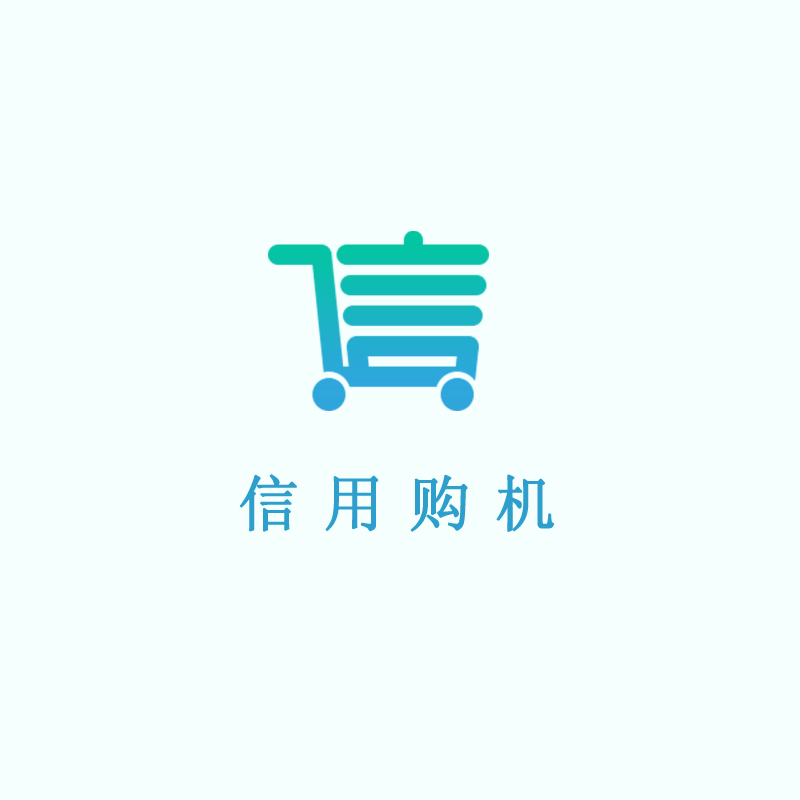
<style>
.page{position:relative;width:800px;height:800px;background:#f5fffd}
.page>*{position:absolute;margin:0}
.t1{font:60px "SjqyCHS";letter-spacing:0.4em;color:#2e9fcc;font-weight:bold}
</style>
<div class="page">
<p class="t1" style="left:239px;top:474px;width:316px;height:58px">信用购机</p>
</div>
